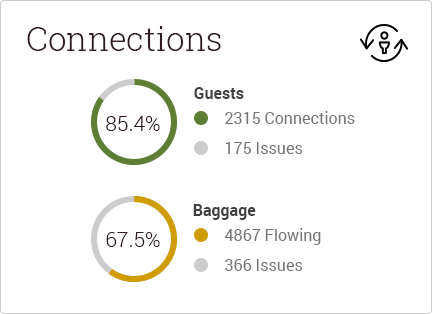
<style>
.page{position:relative;width:432px;height:314px;background:#ffffff}
.page>*{position:absolute;margin:0}
.t1{font:33px "RobotoSlab-Light";color:#2f1b1f}
.t2{font:16px "Roboto-Bold";color:#404040}
.t3{font:16px "Roboto-Regular";color:#767676}
.t4{font:21px "Roboto-Light";color:#2f1b1f}
</style>
<div class="page">
<p class="t1" style="left:27px;top:26px;width:194px;height:25px">Connections</p>
<p class="t2" style="left:194px;top:87px;width:50px;height:12px">Guests</p>
<p class="t3" style="left:225px;top:111px;width:130px;height:13px">2315 Connections</p>
<p class="t4" style="left:106px;top:116px;width:54px;height:15px">85.4%</p>
<p class="t3" style="left:225px;top:142px;width:78px;height:12px">175 Issues</p>
<p class="t2" style="left:193px;top:204px;width:63px;height:16px">Baggage</p>
<p class="t4" style="left:106px;top:232px;width:54px;height:15px">67.5%</p>
<p class="t3" style="left:224px;top:228px;width:97px;height:17px">4867 Flowing</p>
<p class="t3" style="left:225px;top:259px;width:78px;height:12px">366 Issues</p>
</div>
